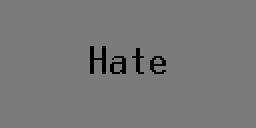
<style>
.page{position:relative;width:256px;height:128px;background:#7b7b7b}
.page>*{position:absolute;margin:0}
.t1{font:36px "Terminal";color:#000000}
</style>
<div class="page">
<p class="t1" style="left:90px;top:46px;width:76px;height:28px">Hate</p>
</div>
